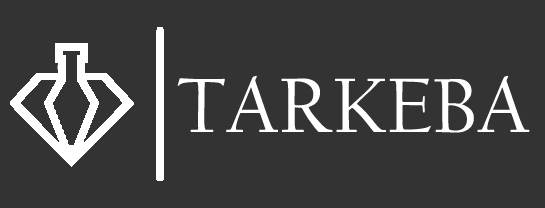
<style>
.page{position:relative;width:545px;height:208px;background:#333333}
.page>*{position:absolute;margin:0}
.t1{font:80px "CalifornianFB-Reg";color:#ffffff}
</style>
<div class="page">
<p class="t1" style="left:177px;top:75px;width:353px;height:58px">TARKEBA</p>
</div>
